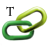
<style>
.page{position:relative;width:48px;height:48px;background:#ffffff}
.page>*{position:absolute;margin:0}
.t1{font:14px "FootlightMTLight"}
</style>
<div class="page">
<p class="t1" style="left:6px;top:6px;width:8px;height:10px">T</p>
</div>
